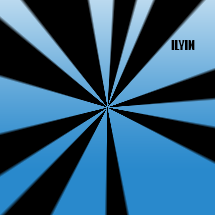
<style>
.page{position:relative;width:215px;height:215px;background:#000000}
.page>*{position:absolute;margin:0}
.t1{font:12.5px "Impact";color:#000000}
</style>
<div class="page">
<p class="t1" style="left:171px;top:40px;width:24px;height:10px">ILYIN</p>
</div>
